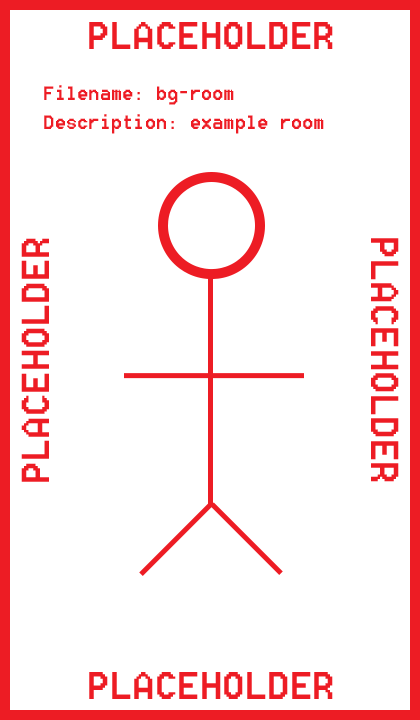
<style>
.page{position:relative;width:420px;height:720px;background:#ffffff}
.page>*{position:absolute;margin:0}
.t1{font:48px "8514oem";color:#ed1c24}
.t2{font:24px "8514oem";color:#ed1c24}
.t3{font:48.3px "8514oem";color:#ed1c24}
</style>
<div class="page">
<p class="t1" style="left:89px;top:22px;width:244px;height:27px">PLACEHOLDER</p>
<p class="t2" style="left:44px;top:85px;width:280px;height:49px">Filename: bg-room<br>Description: example room</p>
<p class="t3" style="left:21px;top:238px;width:28px;height:244px;rotate:-90deg">PLACEHOLDER</p>
<p class="t3" style="left:371px;top:238px;width:28px;height:244px;rotate:90deg">PLACEHOLDER</p>
<p class="t1" style="left:89px;top:672px;width:244px;height:27px">PLACEHOLDER</p>
</div>
